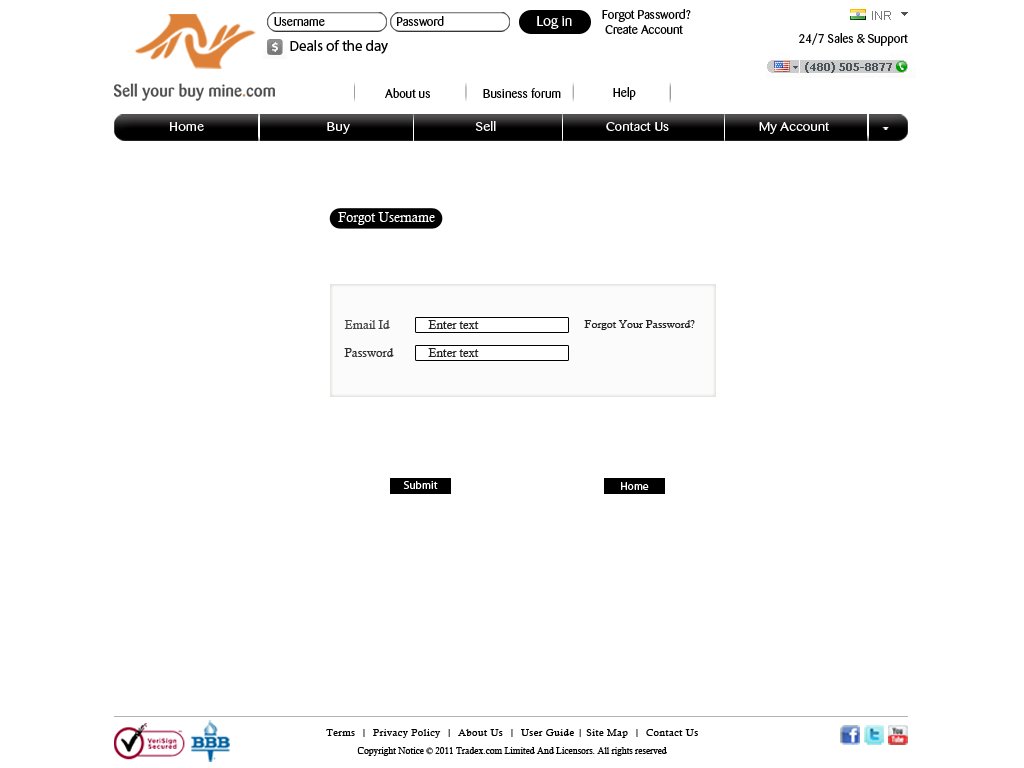
<style>
.page{position:relative;width:1024px;height:768px;background:#ffffff}
.page>*{position:absolute;margin:0}
.t1{font:12px "Barmeno-Regular";color:#000000;scale:1.05 1}
.t2{font:14px "Barmeno-Regular";color:#ffffff;scale:1.05 1}
.t3{font:14.9px "MyriadPro-Regular";color:#000000}
.t4{font:12px "Barmeno-Regular";color:#030303;scale:1.05 1}
.t5{font:12.1px "Barmeno-Regular";color:#ffffff;scale:1.2 1}
.t6{font:13px "CalistoMT";color:#ffffff}
.t7{font:12px "CalistoMT";color:#454545}
.t8{font:12px "CalistoMT";color:#222222}
.t9{font:11px "CalistoMT";color:#222222}
.t10{font:12px "CalistoMT";color:#2f3131}
.t11{font:11px "MyriadPro-Regular";color:#ffffff}
.t12{font:10px/18px "CalistoMT";letter-spacing:0.045em;color:#000000}
.t13{font:9px/18px "CalistoMT";color:#000000}
</style>
<div class="page">
<p class="t1" style="left:274px;top:17px;width:51px;height:9px">Username</p>
<p class="t1" style="left:397px;top:16px;width:47px;height:10px">Password</p>
<p class="t2" style="left:537px;top:16px;width:35px;height:13px">Log in</p>
<p class="t1" style="left:602px;top:9px;width:89px;height:25px">Forgot Password? <br> Create Account</p>
<p class="t3" style="left:290px;top:40px;width:98px;height:14px">Deals of the day</p>
<p class="t4" style="left:799px;top:33px;width:109px;height:13px">24/7 Sales &amp; Support</p>
<p class="t1" style="left:385px;top:88px;width:45px;height:10px">About us</p>
<p class="t1" style="left:483px;top:88px;width:78px;height:10px">Business forum</p>
<p class="t1" style="left:613px;top:87px;width:23px;height:13px">Help</p>
<p class="t5" style="left:170px;top:121px;width:660px;height:13px">Home                                     Buy                                      Sell                                 Contact Us                           My Account</p>
<p class="t6" style="left:338px;top:212px;width:97px;height:13px">Forgot Username</p>
<p class="t7" style="left:344px;top:320px;width:46px;height:9px">Email Id</p>
<p class="t8" style="left:428px;top:320px;width:51px;height:9px">Enter text</p>
<p class="t9" style="left:584px;top:320px;width:111px;height:10px">Forgot Your Password?</p>
<p class="t10" style="left:344px;top:348px;width:50px;height:9px">Password</p>
<p class="t8" style="left:428px;top:348px;width:51px;height:9px">Enter text</p>
<p class="t11" style="left:403px;top:481px;width:35px;height:8px">Submit</p>
<p class="t11" style="left:621px;top:482px;width:28px;height:8px">Home</p>
<p class="t12" style="left:326px;top:729px;width:372px;height:27px;text-align:center">Terms  |  Privacy Policy  |  About Us  |  User Guide | Site Map  |  Contact Us<br><span class="t13">Copyright Notice © 2011 Tradex.com Limited And Licensors. All rights reserved</span></p>
</div>
